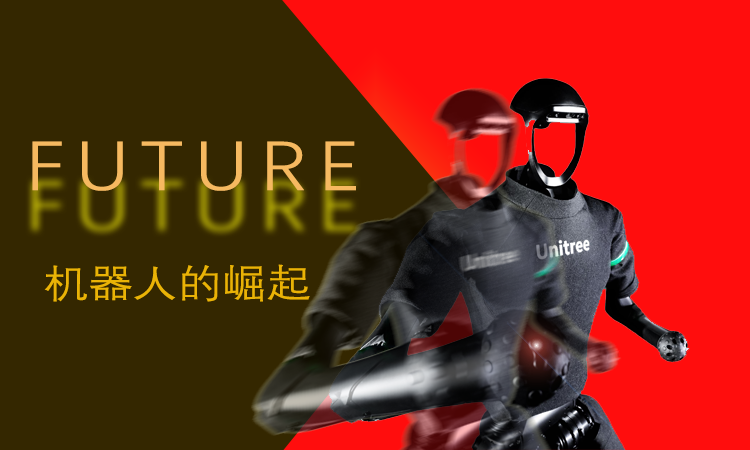
<style>
.page{position:relative;width:750px;height:450px;background:#342700}
.page>*{position:absolute;margin:0}
.t1{font:70.2px "DengXian";letter-spacing:0.15em;color:#f6b960;text-transform:uppercase;scale:1.14 1}
.t2{font:39px "DengXian";color:#eab306;scale:1.14 1}
</style>
<div class="page">
<p class="t1" style="left:32px;top:141px;width:324px;height:50px">future</p>
<p class="t2" style="left:44px;top:264px;width:266px;height:38px">机器人的崛起</p>
</div>
